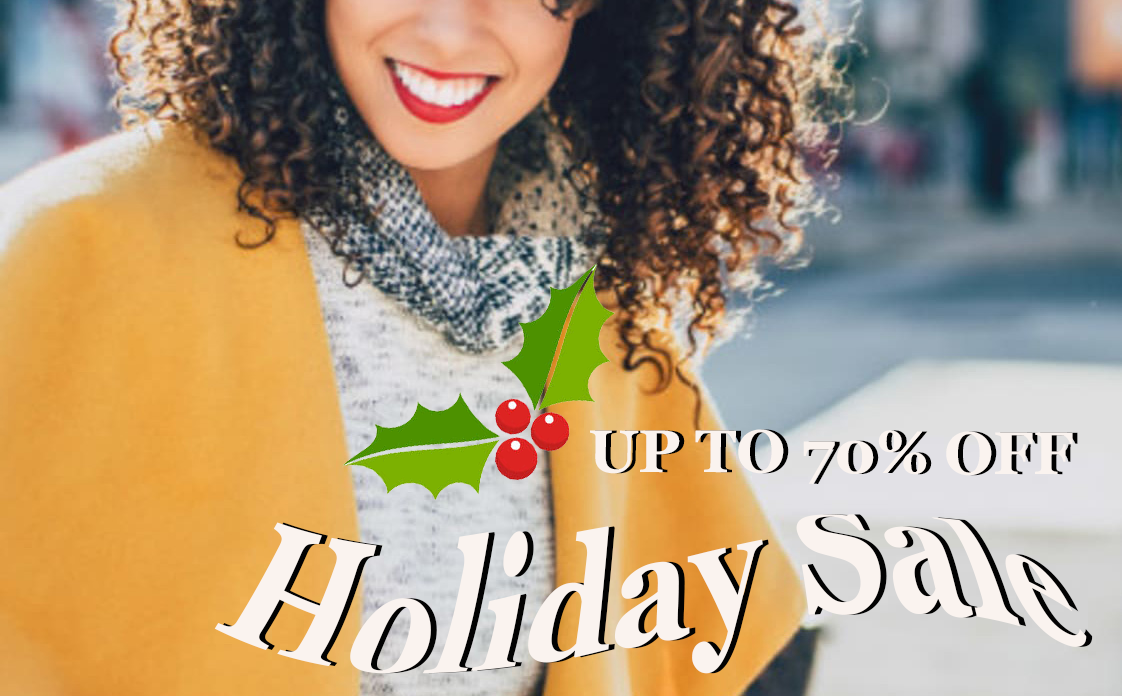
<style>
.page{position:relative;width:1122px;height:696px}
.page>*{position:absolute;margin:0}
.t1{font:60px "Georgia-Bold";color:#faf3ef}
.t2{font:60px "Georgia-Bold"}
.t3{font:157.9px "Georgia-Bold";color:#faf3ef;scale:0.82 1}
</style>
<div class="page">
<p class="t1" style="left:590px;top:429px;width:483px;height:55px">UP TO 70% OFF</p>
<p class="t2" style="left:595px;top:429px;width:483px;height:55px">UP TO 70% OFF</p>
<p class="t3" style="left:214px;top:514px;width:873px;height:160px;rotate:2deg">Holiday Sale</p>
</div>
